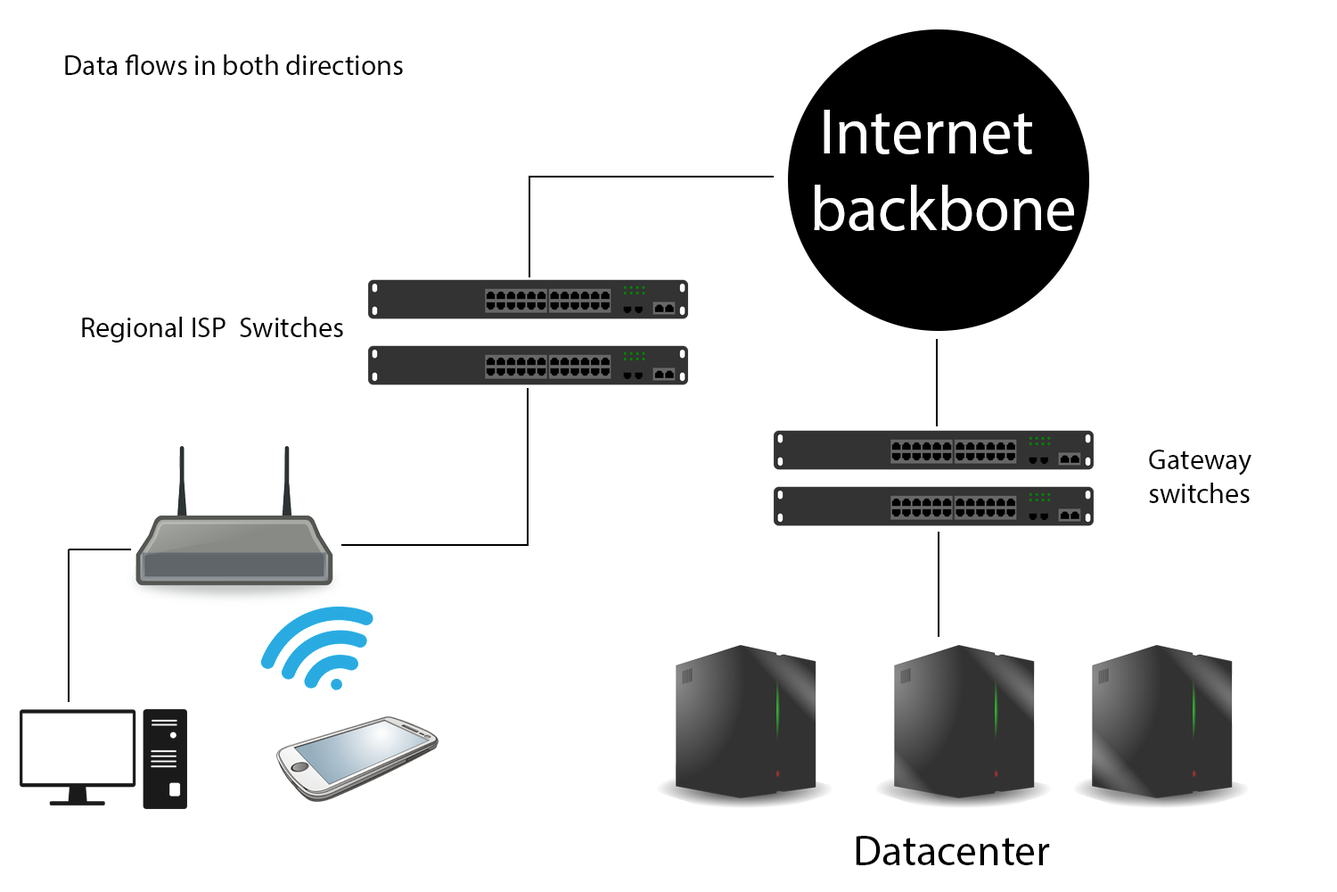
<style>
.page{position:relative;width:1337px;height:892px;background:#ffffff}
.page>*{position:absolute;margin:0}
.t1{font:28.5px "MyriadPro-Regular";color:#000000}
.t2{font:64.2px "MyriadPro-Regular";color:#ffffff}
.t3{font:42.8px "MyriadPro-Regular";color:#000000}
</style>
<div class="page">
<p class="t1" style="left:65px;top:54px;width:338px;height:21px">Data flows in both directions</p>
<p class="t2" style="left:814px;top:110px;width:260px;height:121px">Internet backbone</p>
<p class="t1" style="left:82px;top:317px;width:261px;height:25px">Regional ISP  Switches</p>
<p class="t1" style="left:1149px;top:449px;width:103px;height:54px">Gateway<br>switches</p>
<p class="t3" style="left:856px;top:835px;width:194px;height:30px">Datacenter</p>
</div>
